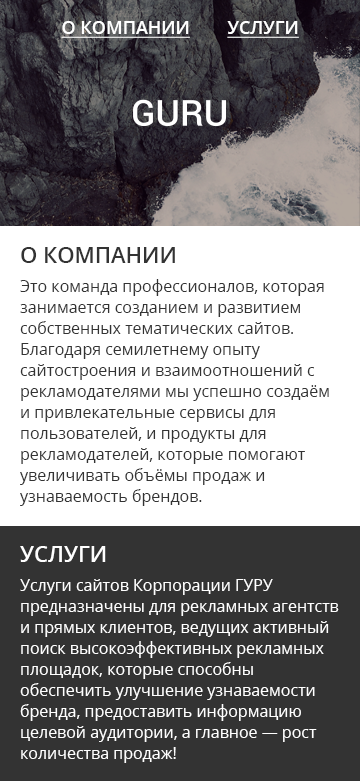
<style>
.page{position:relative;width:360px;height:781px;background:#ffffff}
.page>*{position:absolute;margin:0}
.t1{font:18px "OpenSans-Semibold";color:#ffffff;text-transform:uppercase;text-decoration:underline}
.t2{font:22px "OpenSans-Semibold";color:#333333;text-transform:uppercase}
.t3{font:16px/21px "OpenSans";color:#333333}
.t4{font:22px "OpenSans-Semibold";color:#ffffff;text-transform:uppercase}
.t5{font:16px/21px "OpenSans";color:#ffffff}
</style>
<div class="page">
<p class="t1" style="left:61px;top:21px;width:129px;height:17px">о компании</p>
<p class="t1" style="left:227px;top:21px;width:72px;height:17px">Услуги</p>
<p class="t2" style="left:21px;top:247px;width:154px;height:16px">О компании</p>
<p class="t3" style="left:20px;top:279px;width:309px;height:227px">Это команда профессионалов, которая занимается созданием и развитием собственных тематических сайтов. Благодаря семилетнему опыту сайтостроения и взаимоотношений с рекламодателями мы успешно создаём и привлекательные сервисы для пользователей, и продукты для рекламодателей, которые помогают увеличивать объёмы продаж и узнаваемость брендов.</p>
<p class="t4" style="left:20px;top:546px;width:86px;height:16px">Услуги</p>
<p class="t5" style="left:20px;top:579px;width:319px;height:184px">Услуги сайтов Корпорации ГУРУ предназначены для рекламных агентств и прямых клиентов, ведущих активный поиск высокоэффективных рекламных площадок, которые способны обеспечить улучшение узнаваемости бренда, предоставить информацию целевой аудитории, а главное — рост количества продаж!</p>
</div>
